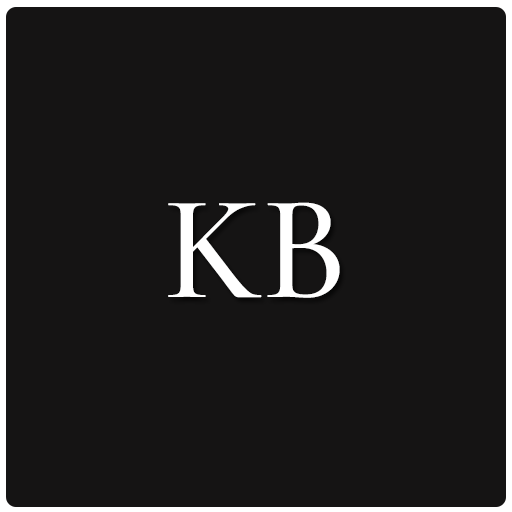
<style>
.page{position:relative;width:512px;height:512px;background:#151414}
.page>*{position:absolute;margin:0}
.t1{font:150px "Cormorant-Medium";color:#ffffff}
</style>
<div class="page">
<p class="t1" style="left:168px;top:202px;width:172px;height:96px">KB</p>
</div>
